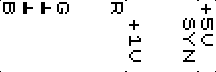
<style>
.page{position:relative;width:216px;height:72px;background:#ffffff}
.page>*{position:absolute;margin:0}
.t1{font:16px/18px "Speccy";color:#000000}
</style>
<div class="page">
<p class="t1" style="left:3px;top:2px;width:210px;height:60px;rotate:90deg">+5V<br> SYN<br><br><br> +1V<br>R<br><br><br>G<br><br><br>B</p>
</div>
